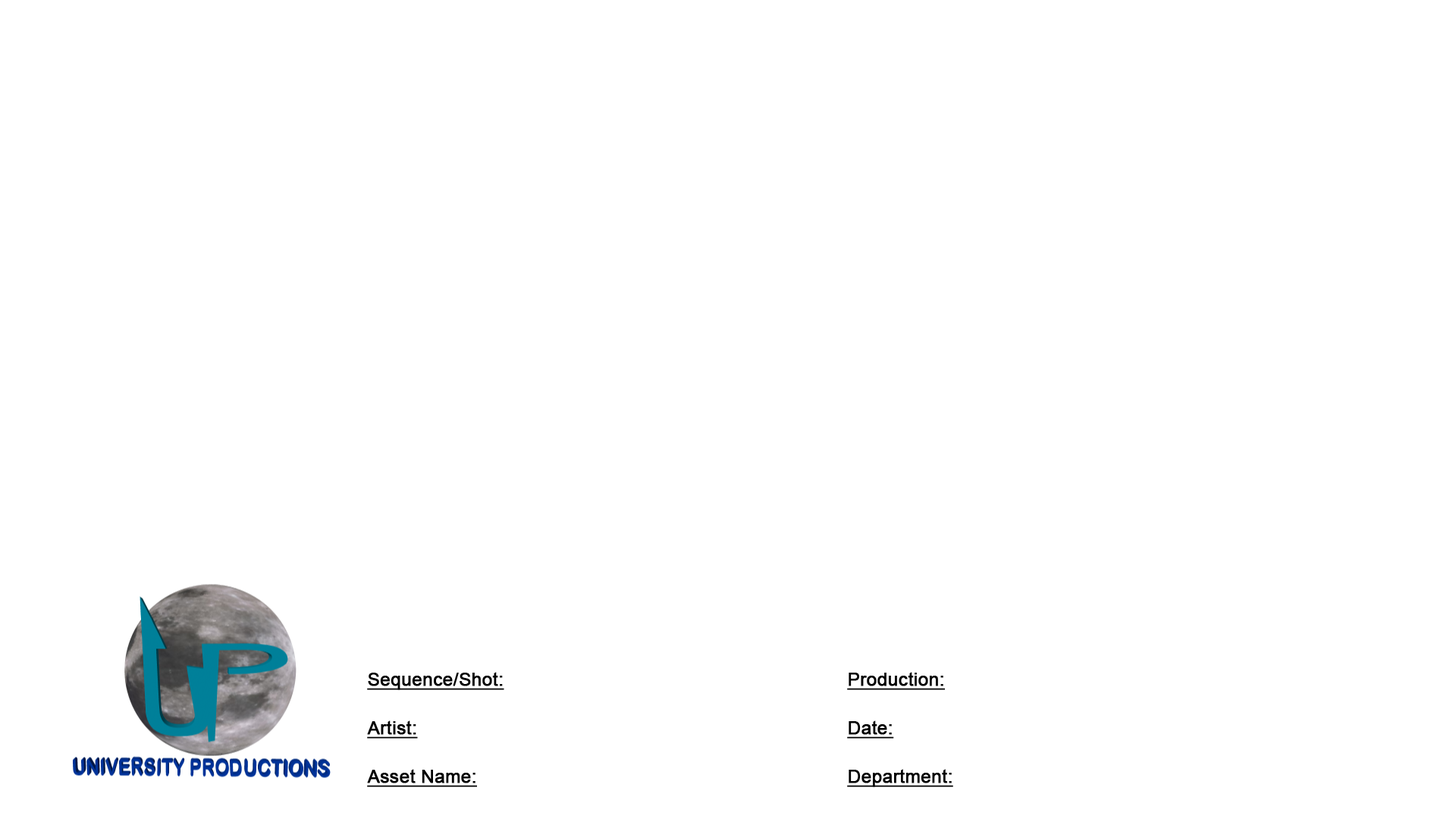
<style>
.page{position:relative;width:1456px;height:819px;background:#ffffff}
.page>*{position:absolute;margin:0}
.t1{font:18.2px "ArialMT";color:#000000;font-weight:bold;text-decoration:underline}
</style>
<div class="page">
<p class="t1" style="left:367px;top:672px;width:137px;height:18px">Sequence/Shot:</p>
<p class="t1" style="left:847px;top:672px;width:98px;height:18px">Production:</p>
<p class="t1" style="left:367px;top:720px;width:51px;height:19px">Artist:</p>
<p class="t1" style="left:847px;top:720px;width:47px;height:19px">Date:</p>
<p class="t1" style="left:367px;top:769px;width:110px;height:18px">Asset Name:</p>
<p class="t1" style="left:847px;top:769px;width:106px;height:18px">Department:</p>
</div>
